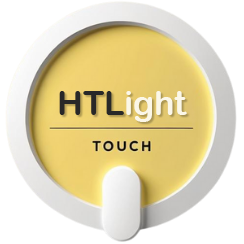
<style>
.page{position:relative;width:244px;height:244px;background:#ffffff}
.page>*{position:absolute;margin:0}
.t1{font:33.6px "ArialRoundedMTBold";color:#fbf7e8}
.t2{font:33.6px "ArialRoundedMTBold";color:#282828}
</style>
<div class="page">
<p class="t1" style="left:59px;top:91px;width:128px;height:31px"><span class="t2">HTL</span>ight</p>
</div>
